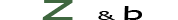
<style>
.page{position:relative;width:178px;height:20px;background:#ffffff}
.page>*{position:absolute;margin:0}
.t1{font:35.6px "Tahoma";color:#3f673f;scale:2.09 1}
.t2{font:12px "Tahoma";color:#000000;scale:2.09 1}
.t3{font:18px "Tahoma";color:#000000;scale:2.09 1}
</style>
<div class="page">
<p class="t1" style="left:42px;top:0px;width:100px;height:20px">z <span class="t2">&amp; </span><span class="t3">b</span></p>
</div>
